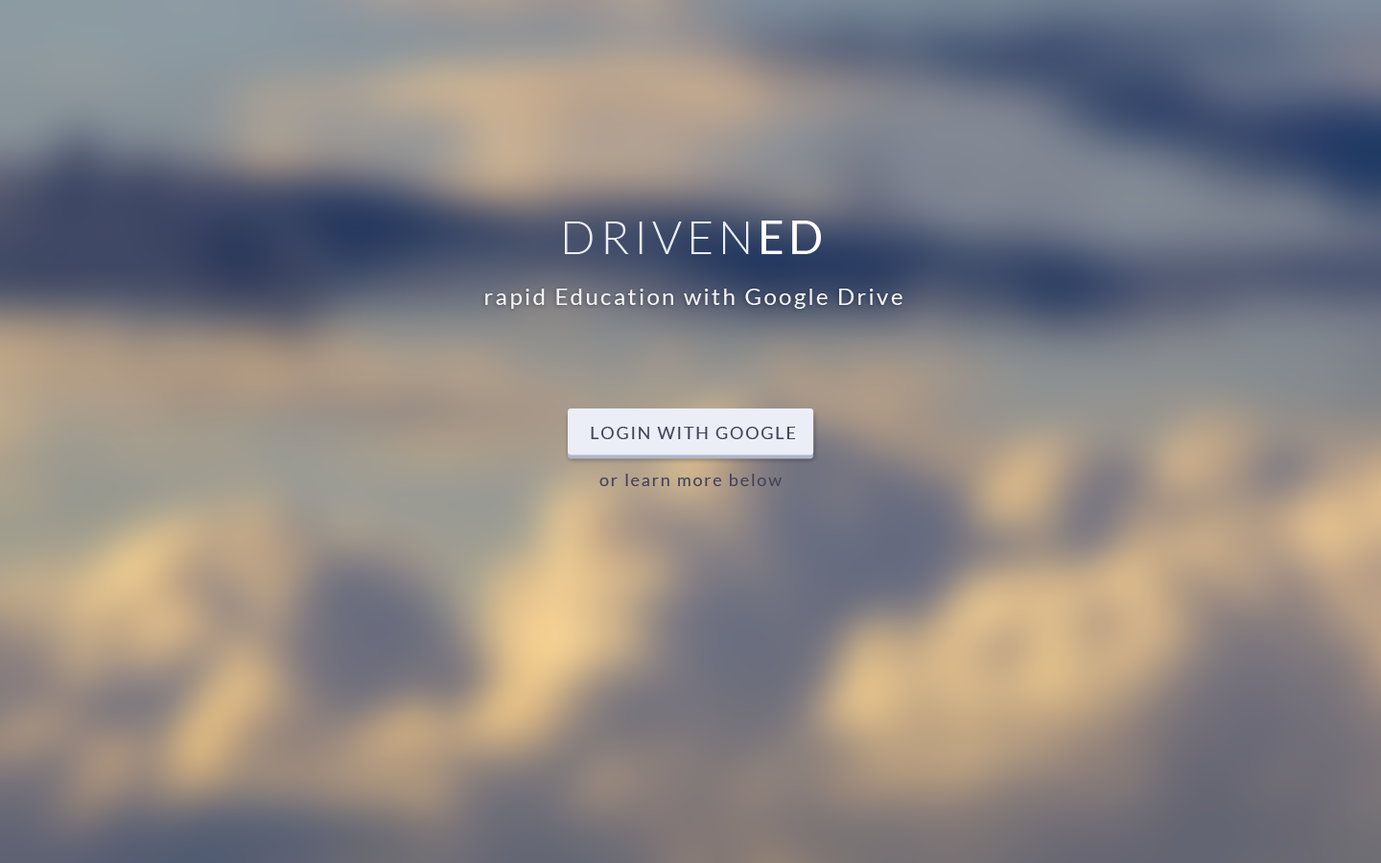
<style>
.page{position:relative;width:1381px;height:863px}
.page>*{position:absolute;margin:0}
.t1{font:46px "Lato-Light";letter-spacing:0.1em;color:#ebeef7}
.t2{font:46px "Lato-Regular";letter-spacing:0.1em;color:#ffffff}
.t3{font:23px "Lato-Regular";letter-spacing:0.1em;color:#f5f5f9}
.t4{font:17.3px "Lato-Regular";letter-spacing:0.1em;color:#414359}
</style>
<div class="page">
<p class="t1" style="left:565px;top:221px;width:256px;height:33px">DRIVEN<span class="t2">ED</span></p>
<p class="t3" style="left:485px;top:289px;width:418px;height:20px">rapid Education with Google Drive</p>
<p class="t4" style="left:591px;top:427px;width:205px;height:12px">LOGIN WITH GOOGLE</p>
<p class="t4" style="left:600px;top:474px;width:182px;height:12px">or learn more below</p>
</div>
